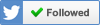
<style>
.page{position:relative;width:100px;height:25px}
.page>*{position:absolute;margin:0}
.t1{font:10px "Arial-BoldMT";letter-spacing:-0.025em;color:#595959;font-weight:bold}
</style>
<div class="page">
<p class="t1" style="left:47px;top:8px;width:42px;height:9px">Followed</p>
</div>
